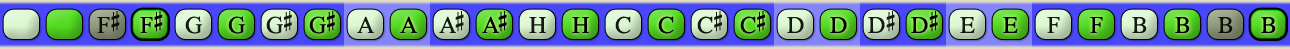
<style>
.page{position:relative;width:1290px;height:49px}
.page>*{position:absolute;margin:0}
.t1{font:24px "OpusChords";color:#000000}
.t2{font:24px "OpusChords";letter-spacing:-0.025em;color:#000000}
.t3{font:24px "OpusChords";letter-spacing:-0.1em;color:#000000}
</style>
<div class="page">
<p class="t1" style="left:97px;top:11px;width:23px;height:22px;opacity:0.9">F#</p>
<p class="t1" style="left:140px;top:11px;width:23px;height:22px">F#</p>
<p class="t1" style="left:185px;top:16px;width:17px;height:18px;opacity:0.9">G</p>
<p class="t1" style="left:228px;top:16px;width:17px;height:18px">G</p>
<p class="t2" style="left:266px;top:11px;width:26px;height:23px;opacity:0.9">G#</p>
<p class="t2" style="left:309px;top:11px;width:26px;height:23px">G#</p>
<p class="t1" style="left:357px;top:16px;width:17px;height:17px;opacity:0.9">A</p>
<p class="t1" style="left:400px;top:16px;width:17px;height:17px">A</p>
<p class="t3" style="left:439px;top:11px;width:25px;height:22px;opacity:0.9">A#</p>
<p class="t3" style="left:482px;top:11px;width:25px;height:22px">A#</p>
<p class="t1" style="left:529px;top:17px;width:17px;height:16px;opacity:0.9">H</p>
<p class="t1" style="left:572px;top:17px;width:17px;height:16px">H</p>
<p class="t1" style="left:615px;top:16px;width:16px;height:18px;opacity:0.9">C</p>
<p class="t1" style="left:658px;top:16px;width:16px;height:18px">C</p>
<p class="t1" style="left:697px;top:11px;width:25px;height:23px;opacity:0.9">C#</p>
<p class="t1" style="left:740px;top:11px;width:25px;height:23px">C#</p>
<p class="t1" style="left:787px;top:17px;width:17px;height:16px;opacity:0.9">D</p>
<p class="t1" style="left:830px;top:17px;width:17px;height:16px">D</p>
<p class="t1" style="left:868px;top:11px;width:27px;height:22px;opacity:0.9">D#</p>
<p class="t1" style="left:911px;top:11px;width:27px;height:22px">D#</p>
<p class="t1" style="left:960px;top:17px;width:15px;height:16px;opacity:0.9">E</p>
<p class="t1" style="left:1003px;top:17px;width:15px;height:16px">E</p>
<p class="t1" style="left:1047px;top:17px;width:13px;height:16px;opacity:0.9">F</p>
<p class="t1" style="left:1090px;top:17px;width:13px;height:16px">F</p>
<p class="t1" style="left:1132px;top:17px;width:15px;height:16px;opacity:0.9">B</p>
<p class="t1" style="left:1175px;top:17px;width:15px;height:16px">B</p>
<p class="t1" style="left:1218px;top:17px;width:15px;height:16px;opacity:0.9">B</p>
<p class="t1" style="left:1261px;top:17px;width:15px;height:16px">B</p>
</div>
